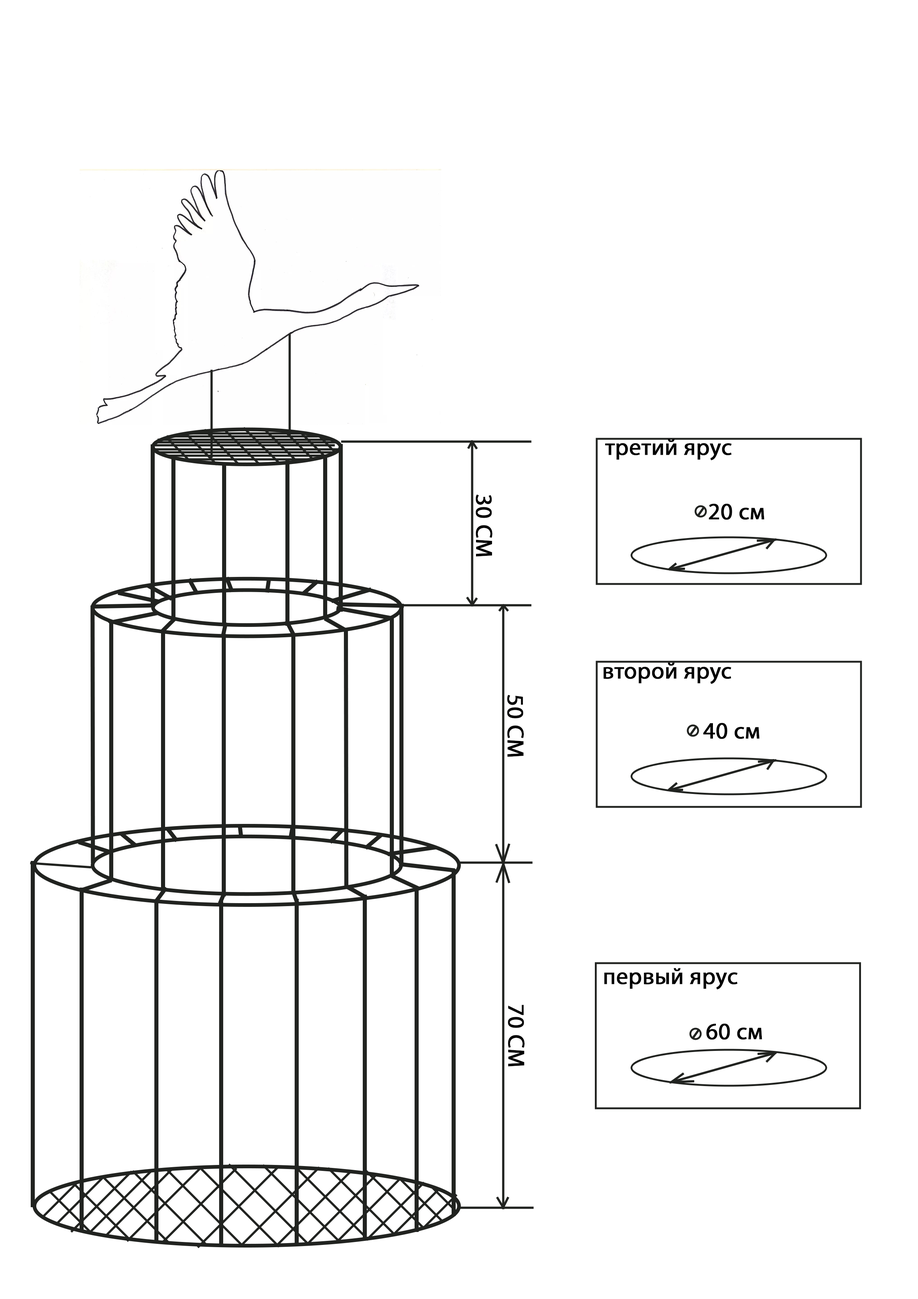
<style>
.page{position:relative;width:918px;height:1299px;background:#ffffff}
.page>*{position:absolute;margin:0}
.t1{font:23.3px "MyriadPro-Regular";color:#010101;font-weight:bold}
</style>
<div class="page">
<p class="t1" style="left:605px;top:439px;width:127px;height:21px">третий ярус</p>
<p class="t1" style="left:476px;top:494px;width:16px;height:62px;rotate:90deg">30 СМ</p>
<p class="t1" style="left:709px;top:504px;width:56px;height:16px">20 см</p>
<p class="t1" style="left:603px;top:662px;width:129px;height:22px">второй ярус</p>
<p class="t1" style="left:507px;top:695px;width:17px;height:62px;rotate:90deg">50 СМ</p>
<p class="t1" style="left:703px;top:723px;width:57px;height:16px">40 см</p>
<p class="t1" style="left:604px;top:968px;width:134px;height:21px">первый ярус</p>
<p class="t1" style="left:508px;top:1004px;width:17px;height:62px;rotate:90deg">70 СМ</p>
<p class="t1" style="left:706px;top:1023px;width:56px;height:17px">60 см</p>
</div>
